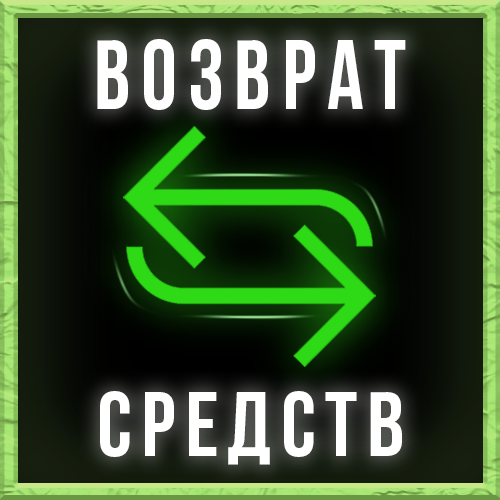
<style>
.page{position:relative;width:500px;height:500px}
.page>*{position:absolute;margin:0}
.t1{font:98px "BebasNeueBold";letter-spacing:0.12em;color:#ffffff;scale:0.92 1}
.t2{font:91px "BebasNeueBold";letter-spacing:0.1em;color:#ffffff}
</style>
<div class="page">
<p class="t1" style="left:97px;top:39px;width:309px;height:71px">возврат</p>
<p class="t2" style="left:100px;top:391px;width:302px;height:74px">средств</p>
</div>
